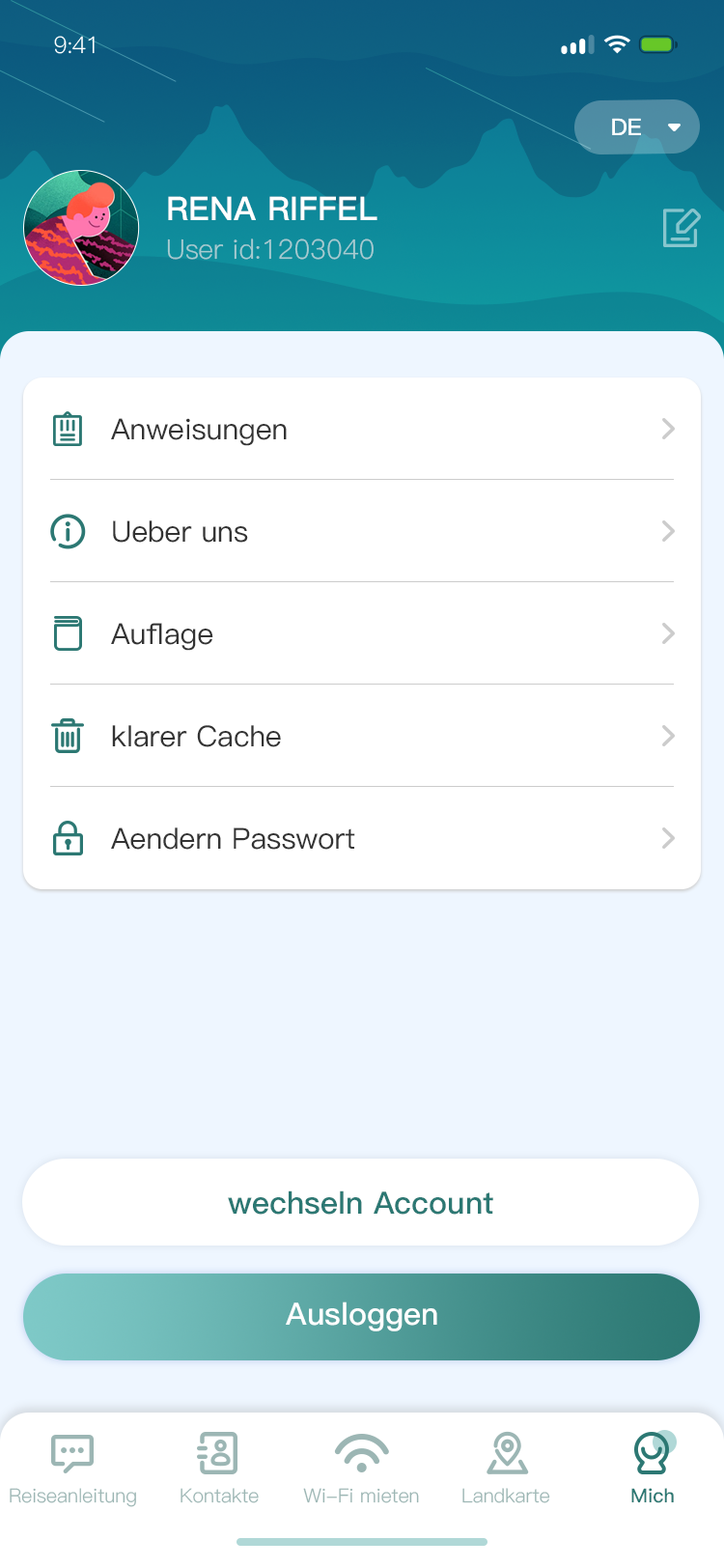
<style>
.page{position:relative;width:724px;height:1568px;background:#ffffff}
.page>*{position:absolute;margin:0}
.t1{font:23.2px "PingFang-SC-Regular";letter-spacing:-0.025em;color:#ffffff}
.t2{font:23.2px "PingFang-SC-Bold";color:#ffffff}
.t3{font:32.8px "PingFang-SC-Heavy";color:#ffffff;text-transform:uppercase}
.t4{font:27px "PingFang-SC-Regular";color:#a6ccd1;text-transform:uppercase}
.t5{font:27px "PingFang-SC-Regular";color:#a6ccd1}
.t6{font:29px "PingFang-SC-Medium";color:#333333}
.t7{font:29px "PingFang-SC-Medium";color:#333333;text-transform:uppercase}
.t8{font:30.9px "PingFang-SC-Bold";color:#2c7873}
.t9{font:30.9px "PingFang-SC-Bold";color:#ffffff}
.t10{font:19.3px "PingFang-SC-Regular";color:#9cb6b4}
.t11{font:19.3px "PingFang-SC-Bold";color:#2c7873}
</style>
<div class="page">
<p class="t1" style="left:54px;top:36px;width:41px;height:18px">9:41</p>
<p class="t2" style="left:612px;top:118px;width:29px;height:17px">DE</p>
<p class="t3" style="left:168px;top:196px;width:210px;height:24px">Rena Riffel</p>
<p class="t4" style="left:167px;top:238px;width:207px;height:22px">u<span class="t5">ser id</span>:1203040</p>
<p class="t6" style="left:111px;top:418px;width:176px;height:28px"><span class="t7">A</span>nweisungen</p>
<p class="t6" style="left:113px;top:520px;width:135px;height:23px">Ueber uns</p>
<p class="t6" style="left:111px;top:623px;width:102px;height:28px">Auflage</p>
<p class="t6" style="left:112px;top:725px;width:169px;height:22px">klarer Cache</p>
<p class="t6" style="left:111px;top:827px;width:244px;height:23px">Aendern Passwort</p>
<p class="t8" style="left:228px;top:1190px;width:265px;height:25px">wechseln Account</p>
<p class="t9" style="left:286px;top:1302px;width:151px;height:29px">Ausloggen</p>
<p class="t10" style="left:10px;top:1488px;width:126px;height:19px">Reiseanleitung</p>
<p class="t10" style="left:181px;top:1488px;width:78px;height:15px">Kontakte</p>
<p class="t10" style="left:303px;top:1488px;width:116px;height:15px">Wi-Fi mieten</p>
<p class="t10" style="left:462px;top:1488px;width:88px;height:15px">Landkarte</p>
<p class="t11" style="left:631px;top:1488px;width:43px;height:15px">Mich</p>
</div>
